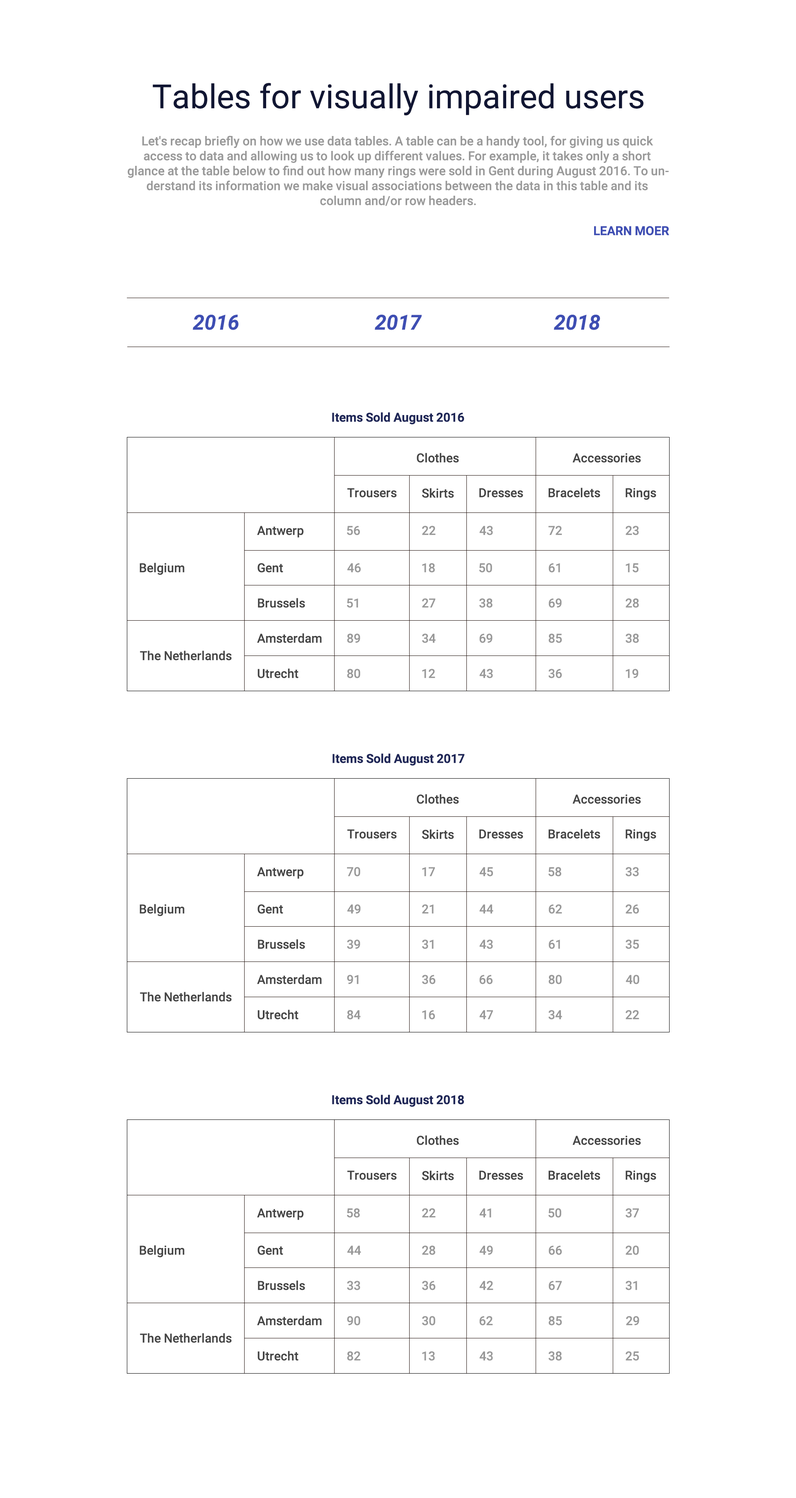
<style>
.page{position:relative;width:796px;height:1498px;background:#ffffff}
.page>*{position:absolute;margin:0}
.t1{font:33.2px "Roboto-Regular";color:#111633}
.t2{font:12.4px "Roboto-Medium";color:#999999}
.t3{font:12.4px "Roboto-Bold";color:#3e4eb3}
.t4{font:20.7px "Roboto-BoldItalic";color:#3e4eb3}
.t5{font:12.4px "Roboto-Bold";color:#1e2657}
.t6{font:12.4px "Roboto-Medium";color:#444444}
</style>
<div class="page">
<p class="t1" style="left:153px;top:83px;width:490px;height:33px">Tables for visually impaired users</p>
<p class="t2" style="left:128px;top:136px;width:541px;height:70px;text-align:center">Let's recap briefly on how we use data tables. A table can be a handy tool, for giving us quick access to data and allowing us to look up different values. For example, it takes only a short glance at the table below to find out how many rings were sold in Gent during August 2016. To understand its information we make visual associations between the data in this table and its column and/or row headers.</p>
<p class="t3" style="left:594px;top:226px;width:75px;height:9px">LEARN MOER</p>
<p class="t4" style="left:193px;top:314px;width:46px;height:16px">2016</p>
<p class="t4" style="left:375px;top:314px;width:47px;height:16px">2017</p>
<p class="t4" style="left:554px;top:314px;width:46px;height:16px">2018</p>
<p class="t5" style="left:332px;top:412px;width:132px;height:13px">Items Sold August 2016</p>
<p class="t6" style="left:417px;top:453px;width:42px;height:10px">Clothes</p>
<p class="t6" style="left:573px;top:453px;width:68px;height:10px">Accessories</p>
<p class="t6" style="left:347px;top:488px;width:50px;height:10px">Trousers</p>
<p class="t6" style="left:422px;top:488px;width:32px;height:10px">Skirts</p>
<p class="t6" style="left:479px;top:488px;width:44px;height:10px">Dresses</p>
<p class="t6" style="left:549px;top:488px;width:51px;height:10px">Bracelets</p>
<p class="t6" style="left:626px;top:488px;width:30px;height:12px">Rings</p>
<p class="t6" style="left:257px;top:526px;width:46px;height:12px">Antwerp</p>
<p class="t2" style="left:347px;top:526px;width:13px;height:9px">56</p>
<p class="t2" style="left:422px;top:526px;width:14px;height:9px">22</p>
<p class="t2" style="left:479px;top:526px;width:14px;height:9px">43</p>
<p class="t2" style="left:549px;top:526px;width:13px;height:9px">72</p>
<p class="t2" style="left:626px;top:526px;width:13px;height:9px">23</p>
<p class="t6" style="left:140px;top:563px;width:44px;height:12px">Belgium</p>
<p class="t6" style="left:257px;top:563px;width:26px;height:10px">Gent</p>
<p class="t2" style="left:347px;top:563px;width:14px;height:10px">46</p>
<p class="t2" style="left:422px;top:563px;width:13px;height:10px">18</p>
<p class="t2" style="left:479px;top:563px;width:13px;height:10px">50</p>
<p class="t2" style="left:549px;top:563px;width:11px;height:10px">61</p>
<p class="t2" style="left:626px;top:563px;width:12px;height:10px">15</p>
<p class="t6" style="left:258px;top:598px;width:47px;height:10px">Brussels</p>
<p class="t2" style="left:347px;top:598px;width:11px;height:10px">51</p>
<p class="t2" style="left:422px;top:598px;width:13px;height:10px">27</p>
<p class="t2" style="left:479px;top:598px;width:14px;height:10px">38</p>
<p class="t2" style="left:549px;top:598px;width:13px;height:10px">69</p>
<p class="t2" style="left:626px;top:598px;width:13px;height:10px">28</p>
<p class="t6" style="left:257px;top:633px;width:65px;height:10px">Amsterdam</p>
<p class="t2" style="left:347px;top:634px;width:13px;height:9px">89</p>
<p class="t2" style="left:422px;top:634px;width:14px;height:9px">34</p>
<p class="t2" style="left:479px;top:634px;width:14px;height:9px">69</p>
<p class="t2" style="left:549px;top:634px;width:13px;height:9px">85</p>
<p class="t2" style="left:626px;top:634px;width:13px;height:9px">38</p>
<p class="t6" style="left:140px;top:651px;width:92px;height:9px">The Netherlands</p>
<p class="t6" style="left:257px;top:668px;width:42px;height:10px">Utrecht</p>
<p class="t2" style="left:347px;top:669px;width:13px;height:9px">80</p>
<p class="t2" style="left:422px;top:669px;width:13px;height:9px">12</p>
<p class="t2" style="left:479px;top:669px;width:14px;height:9px">43</p>
<p class="t2" style="left:549px;top:669px;width:13px;height:9px">36</p>
<p class="t2" style="left:626px;top:669px;width:12px;height:9px">19</p>
<p class="t5" style="left:333px;top:753px;width:132px;height:13px">Items Sold August 2017</p>
<p class="t6" style="left:417px;top:794px;width:42px;height:10px">Clothes</p>
<p class="t6" style="left:573px;top:794px;width:68px;height:10px">Accessories</p>
<p class="t6" style="left:347px;top:829px;width:50px;height:10px">Trousers</p>
<p class="t6" style="left:422px;top:829px;width:32px;height:10px">Skirts</p>
<p class="t6" style="left:479px;top:829px;width:44px;height:10px">Dresses</p>
<p class="t6" style="left:549px;top:829px;width:51px;height:10px">Bracelets</p>
<p class="t6" style="left:626px;top:829px;width:30px;height:12px">Rings</p>
<p class="t6" style="left:257px;top:867px;width:46px;height:12px">Antwerp</p>
<p class="t2" style="left:347px;top:867px;width:13px;height:9px">70</p>
<p class="t2" style="left:422px;top:867px;width:13px;height:9px">17</p>
<p class="t2" style="left:479px;top:867px;width:14px;height:9px">45</p>
<p class="t2" style="left:549px;top:867px;width:12px;height:9px">58</p>
<p class="t2" style="left:626px;top:867px;width:13px;height:9px">33</p>
<p class="t6" style="left:140px;top:904px;width:44px;height:12px">Belgium</p>
<p class="t6" style="left:257px;top:904px;width:26px;height:10px">Gent</p>
<p class="t2" style="left:347px;top:904px;width:14px;height:10px">49</p>
<p class="t2" style="left:422px;top:904px;width:12px;height:10px">21</p>
<p class="t2" style="left:479px;top:904px;width:14px;height:10px">44</p>
<p class="t2" style="left:549px;top:904px;width:13px;height:10px">62</p>
<p class="t2" style="left:626px;top:904px;width:13px;height:10px">26</p>
<p class="t6" style="left:258px;top:939px;width:47px;height:10px">Brussels</p>
<p class="t2" style="left:347px;top:939px;width:13px;height:10px">39</p>
<p class="t2" style="left:422px;top:939px;width:12px;height:10px">31</p>
<p class="t2" style="left:479px;top:939px;width:14px;height:10px">43</p>
<p class="t2" style="left:549px;top:939px;width:11px;height:10px">61</p>
<p class="t2" style="left:626px;top:939px;width:13px;height:10px">35</p>
<p class="t6" style="left:257px;top:974px;width:65px;height:10px">Amsterdam</p>
<p class="t2" style="left:347px;top:975px;width:12px;height:9px">91</p>
<p class="t2" style="left:422px;top:975px;width:13px;height:9px">36</p>
<p class="t2" style="left:479px;top:975px;width:14px;height:9px">66</p>
<p class="t2" style="left:549px;top:975px;width:13px;height:9px">80</p>
<p class="t2" style="left:626px;top:975px;width:13px;height:9px">40</p>
<p class="t6" style="left:140px;top:992px;width:92px;height:10px">The Netherlands</p>
<p class="t6" style="left:257px;top:1010px;width:42px;height:10px">Utrecht</p>
<p class="t2" style="left:347px;top:1010px;width:14px;height:10px">84</p>
<p class="t2" style="left:422px;top:1010px;width:13px;height:10px">16</p>
<p class="t2" style="left:479px;top:1010px;width:14px;height:10px">47</p>
<p class="t2" style="left:549px;top:1010px;width:13px;height:10px">34</p>
<p class="t2" style="left:626px;top:1010px;width:13px;height:10px">22</p>
<p class="t5" style="left:332px;top:1095px;width:132px;height:12px">Items Sold August 2018</p>
<p class="t6" style="left:417px;top:1135px;width:42px;height:10px">Clothes</p>
<p class="t6" style="left:573px;top:1136px;width:68px;height:9px">Accessories</p>
<p class="t6" style="left:347px;top:1170px;width:50px;height:10px">Trousers</p>
<p class="t6" style="left:422px;top:1170px;width:32px;height:10px">Skirts</p>
<p class="t6" style="left:479px;top:1170px;width:44px;height:10px">Dresses</p>
<p class="t6" style="left:549px;top:1170px;width:51px;height:10px">Bracelets</p>
<p class="t6" style="left:626px;top:1170px;width:30px;height:12px">Rings</p>
<p class="t6" style="left:257px;top:1208px;width:46px;height:12px">Antwerp</p>
<p class="t2" style="left:347px;top:1208px;width:13px;height:10px">58</p>
<p class="t2" style="left:422px;top:1208px;width:14px;height:10px">22</p>
<p class="t2" style="left:479px;top:1208px;width:12px;height:10px">41</p>
<p class="t2" style="left:549px;top:1208px;width:12px;height:10px">50</p>
<p class="t2" style="left:626px;top:1208px;width:13px;height:10px">37</p>
<p class="t6" style="left:140px;top:1245px;width:44px;height:12px">Belgium</p>
<p class="t6" style="left:257px;top:1245px;width:26px;height:10px">Gent</p>
<p class="t2" style="left:347px;top:1245px;width:14px;height:10px">44</p>
<p class="t2" style="left:422px;top:1245px;width:13px;height:10px">28</p>
<p class="t2" style="left:479px;top:1245px;width:14px;height:10px">49</p>
<p class="t2" style="left:549px;top:1245px;width:13px;height:10px">66</p>
<p class="t2" style="left:626px;top:1245px;width:13px;height:10px">20</p>
<p class="t6" style="left:258px;top:1280px;width:47px;height:10px">Brussels</p>
<p class="t2" style="left:347px;top:1281px;width:13px;height:9px">33</p>
<p class="t2" style="left:422px;top:1281px;width:13px;height:9px">36</p>
<p class="t2" style="left:479px;top:1281px;width:14px;height:9px">42</p>
<p class="t2" style="left:549px;top:1281px;width:13px;height:9px">67</p>
<p class="t2" style="left:626px;top:1281px;width:11px;height:9px">31</p>
<p class="t6" style="left:257px;top:1316px;width:65px;height:9px">Amsterdam</p>
<p class="t2" style="left:347px;top:1316px;width:13px;height:9px">90</p>
<p class="t2" style="left:422px;top:1316px;width:13px;height:9px">30</p>
<p class="t2" style="left:479px;top:1316px;width:14px;height:9px">62</p>
<p class="t2" style="left:549px;top:1316px;width:13px;height:9px">85</p>
<p class="t2" style="left:626px;top:1316px;width:13px;height:9px">29</p>
<p class="t6" style="left:140px;top:1333px;width:92px;height:10px">The Netherlands</p>
<p class="t6" style="left:257px;top:1351px;width:42px;height:10px">Utrecht</p>
<p class="t2" style="left:347px;top:1351px;width:14px;height:10px">82</p>
<p class="t2" style="left:422px;top:1351px;width:13px;height:10px">13</p>
<p class="t2" style="left:479px;top:1351px;width:14px;height:10px">43</p>
<p class="t2" style="left:549px;top:1351px;width:13px;height:10px">38</p>
<p class="t2" style="left:626px;top:1351px;width:13px;height:10px">25</p>
</div>
